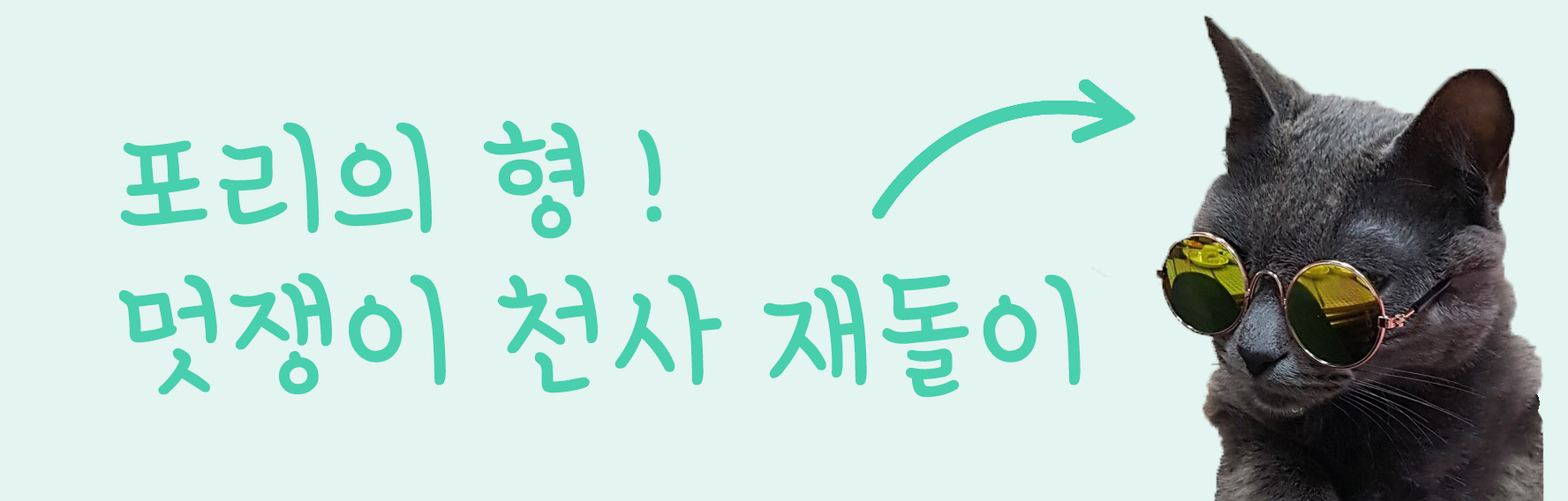
<style>
.page{position:relative;width:1568px;height:501px;background:#e3f4f1}
.page>*{position:absolute;margin:0}
.t1{font:126.9px "HoonLefthanderR";color:#48cfae}
</style>
<div class="page">
<p class="t1" style="left:118px;top:120px;width:963px;height:277px">포리의 형 !<br>멋쟁이 천사 재돌이</p>
</div>
